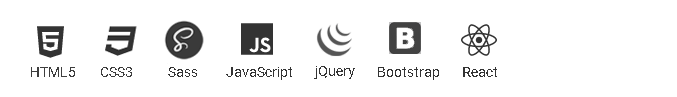
<style>
.page{position:relative;width:677px;height:97px;background:#ffffff}
.page>*{position:absolute;margin:0}
.t1{font:14px "Roboto-Regular";color:#3d3d3d}
.t2{font:14px "Roboto-Regular";color:#333333}
</style>
<div class="page">
<p class="t1" style="left:31px;top:67px;width:44px;height:10px">HTML5</p>
<p class="t1" style="left:101px;top:67px;width:31px;height:10px">CSS3</p>
<p class="t2" style="left:168px;top:67px;width:29px;height:10px">Sass</p>
<p class="t2" style="left:226px;top:67px;width:66px;height:13px">JavaScript</p>
<p class="t2" style="left:314px;top:66px;width:41px;height:13px">jQuery</p>
<p class="t2" style="left:378px;top:67px;width:61px;height:13px">Bootstrap</p>
<p class="t2" style="left:463px;top:67px;width:34px;height:10px">React</p>
</div>
